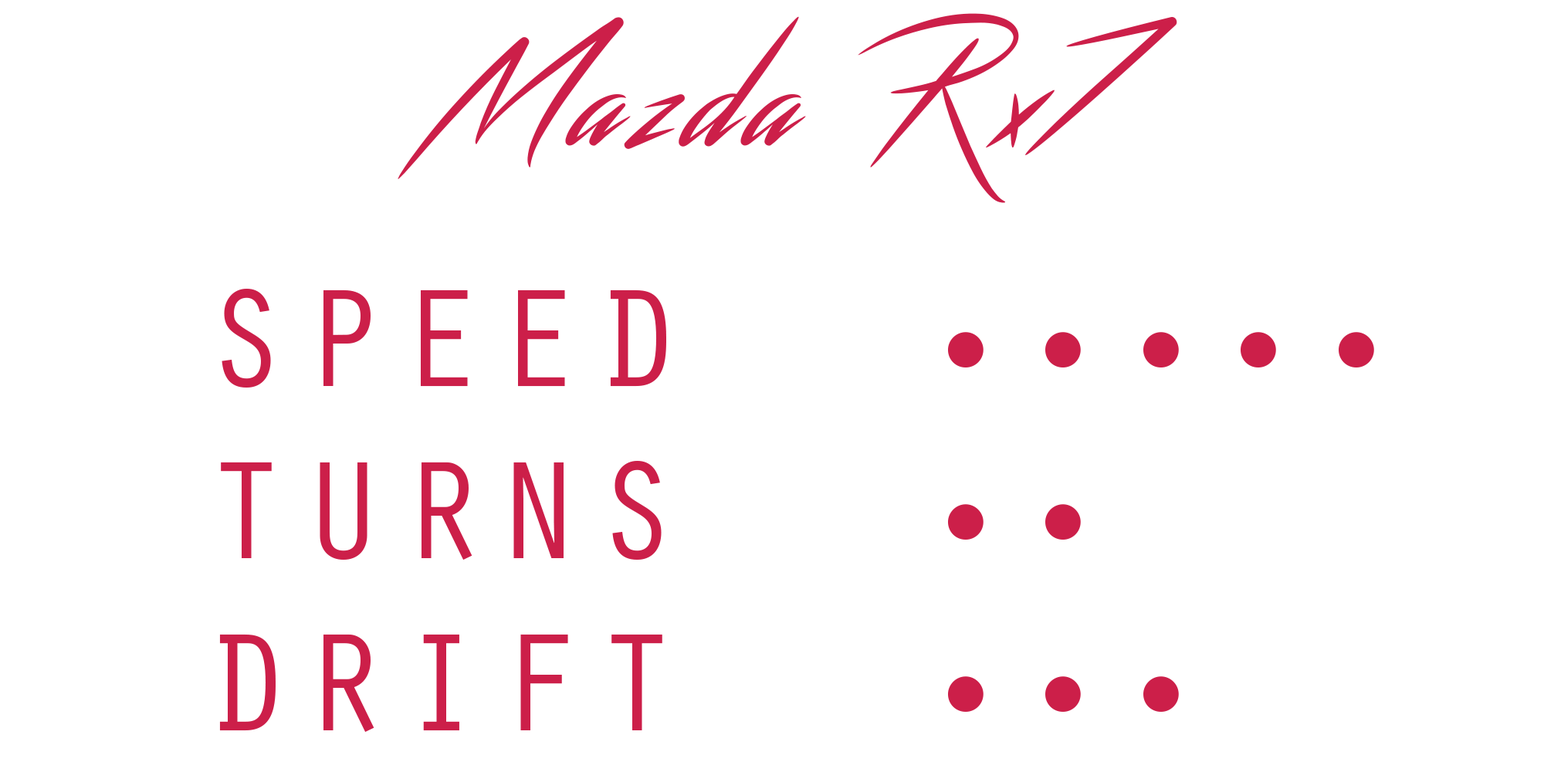
<style>
.page{position:relative;width:1544px;height:772px;background:#ffffff}
.page>*{position:absolute;margin:0}
.t1{font:143.6px "Streamster";letter-spacing:0.08em;color:#cc1f49}
.t2{font:143.6px "OratorStd";letter-spacing:0.08em;color:#cc1f49}
</style>
<div class="page">
<p class="t1" style="left:398px;top:13px;width:780px;height:190px">Mazda Rx7</p>
<p class="t2" style="left:219px;top:288px;width:447px;height:444px;text-align:center">SPEED<br>TURNS<br>DRIFT</p>
<p class="t2" style="left:948px;top:332px;width:426px;height:380px;text-align:center">•••••<br>     ••<br>      •••</p>
</div>
